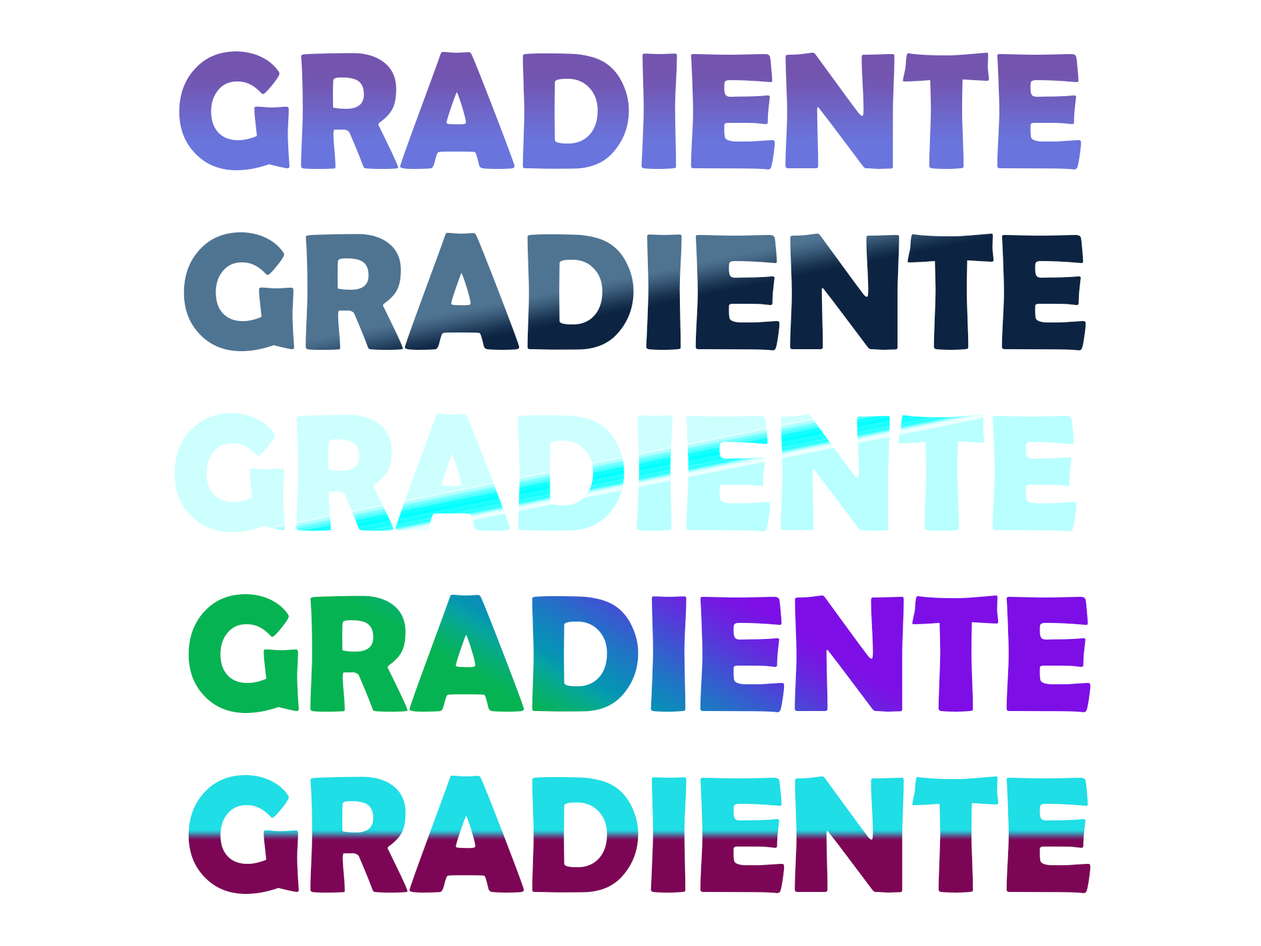
<style>
.page{position:relative;width:1261px;height:946px;background:#ffffff}
.page>*{position:absolute;margin:0}
.t1{font:166.8px "BerlinSansFBDemi-Bold"}
.t2{font:166.8px "BerlinSansFBDemi-Bold";color:#b9ffff}
</style>
<div class="page">
<p class="t1" style="left:179px;top:51px;width:903px;height:119px">GRADIENTE</p>
<p class="t1" style="left:183px;top:232px;width:903px;height:119px">GRADIENTE</p>
<p class="t2" style="left:174px;top:413px;width:903px;height:119px">GRADIENTE</p>
<p class="t1" style="left:188px;top:594px;width:903px;height:119px">GRADIENTE</p>
<p class="t1" style="left:188px;top:775px;width:903px;height:118px">GRADIENTE</p>
</div>
